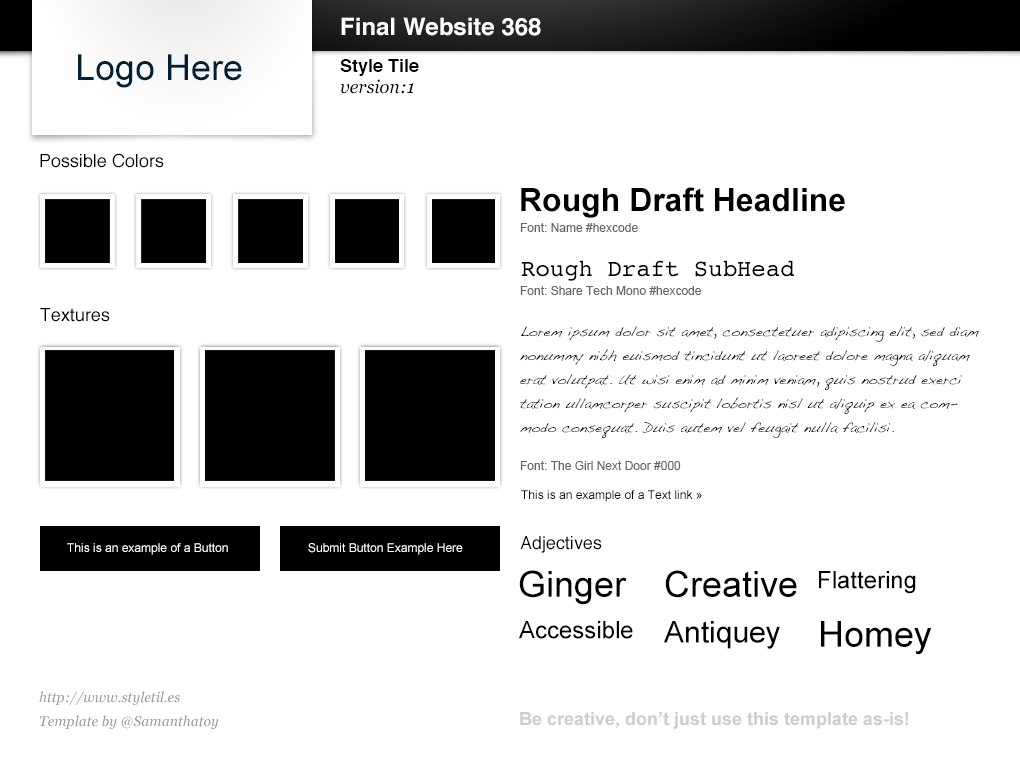
<style>
.page{position:relative;width:1020px;height:760px;background:#ffffff}
.page>*{position:absolute;margin:0}
.t1{font:24px "Helvetica-Bold";color:#ffffff}
.t2{font:36px "ArialMT";color:#002035}
.t3{font:18px "Helvetica-Bold";color:#000000}
.t4{font:18px "Georgia-Italic";color:#000000}
.t5{font:18px "Helvetica";color:#000000}
.t6{font:32px "Arial-BoldMT";color:#000000}
.t7{font:12px "ArialMT";color:#666666}
.t8{font:24px "Courier";color:#000000}
.t9{font:14px/24px "Handwriting-Dakota";color:#000000}
.t10{font:12px "ArialMT";color:#000000}
.t11{font:12px "ArialMT";color:#ffffff}
.t12{font:36px "ArialMT";color:#000000}
.t13{font:24px "ArialMT";color:#000000}
.t14{font:30px "ArialMT";color:#000000}
.t15{font:14px/24px "Georgia-Italic";color:#999999}
.t16{font:18px "Arial-BoldMT";color:#cccccc}
</style>
<div class="page">
<p class="t1" style="left:341px;top:17px;width:200px;height:19px">Final Website 368</p>
<p class="t2" style="left:78px;top:54px;width:164px;height:34px">Logo Here</p>
<p class="t3" style="left:340px;top:59px;width:79px;height:17px">Style Tile</p>
<p class="t4" style="left:340px;top:79px;width:74px;height:15px">version:1</p>
<p class="t5" style="left:40px;top:153px;width:124px;height:15px">Possible Colors</p>
<p class="t6" style="left:521px;top:187px;width:324px;height:31px">Rough Draft Headline</p>
<p class="t7" style="left:520px;top:223px;width:118px;height:9px">Font: Name #hexcode</p>
<p class="t8" style="left:521px;top:260px;width:273px;height:21px">Rough Draft SubHead</p>
<p class="t7" style="left:520px;top:286px;width:181px;height:9px">Font: Share Tech Mono #hexcode</p>
<p class="t5" style="left:40px;top:308px;width:70px;height:14px">Textures</p>
<p class="t9" style="left:520px;top:326px;width:459px;height:112px">Lorem ipsum dolor sit amet, consectetuer adipiscing elit, sed diam nonummy nibh euismod tincidunt ut laoreet dolore magna aliquam erat volutpat. Ut wisi enim ad minim veniam, quis nostrud exerci tation ullamcorper suscipit lobortis nisl ut aliquip ex ea commodo consequat. Duis autem vel feugait nulla facilisi.</p>
<p class="t7" style="left:520px;top:461px;width:161px;height:9px">Font: The Girl Next Door #000</p>
<p class="t10" style="left:521px;top:490px;width:181px;height:12px">This is an example of a Text link »</p>
<p class="t11" style="left:67px;top:543px;width:161px;height:12px">This is an example of a Button</p>
<p class="t11" style="left:308px;top:543px;width:155px;height:12px">Submit Button Example Here</p>
<p class="t5" style="left:520px;top:536px;width:82px;height:17px">Adjectives</p>
<p class="t12" style="left:519px;top:570px;width:108px;height:35px">Ginger</p>
<p class="t12" style="left:665px;top:570px;width:132px;height:28px">Creative</p>
<p class="t13" style="left:819px;top:571px;width:97px;height:23px">Flattering</p>
<p class="t13" style="left:519px;top:621px;width:114px;height:18px">Accessible</p>
<p class="t14" style="left:664px;top:621px;width:116px;height:28px">Antiquey</p>
<p class="t12" style="left:821px;top:621px;width:111px;height:34px">Homey</p>
<p class="t15" style="left:39px;top:691px;width:180px;height:38px">http://www.styletil.es<br>Template by @Samanthatoy</p>
<p class="t16" style="left:520px;top:712px;width:388px;height:17px">Be creative, don’t just use this template as-is!</p>
</div>
